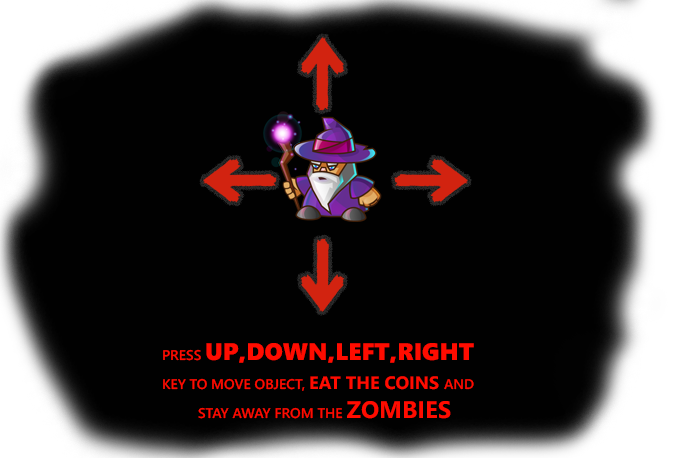
<style>
.page{position:relative;width:675px;height:458px;background:#010101}
.page>*{position:absolute;margin:0}
.t1{font:14px "SegoeUI-Semibold";color:#ff0c00}
.t2{font:24px "SegoeUI-Semibold";color:#ff0c00}
.t3{font:24px "SegoeUIBlack";color:#ff0c00}
.t4{font:18px "SegoeUI-Bold";color:#ff0c00}
.t5{font:24px "SegoeUI-Bold";color:#ff0c00}
</style>
<div class="page">
<p class="t1" style="left:163px;top:343px;width:311px;height:76px"><span class="t2">  </span>PRESS <span class="t3">UP,DOWN,LEFT,RIGHT<br>  </span>KEY TO MOVE OBJECT, <span class="t4">EAT THE COINS </span>AND <br>   STAY AWAY FROM THE <span class="t5">ZOMBIES</span></p>
</div>
